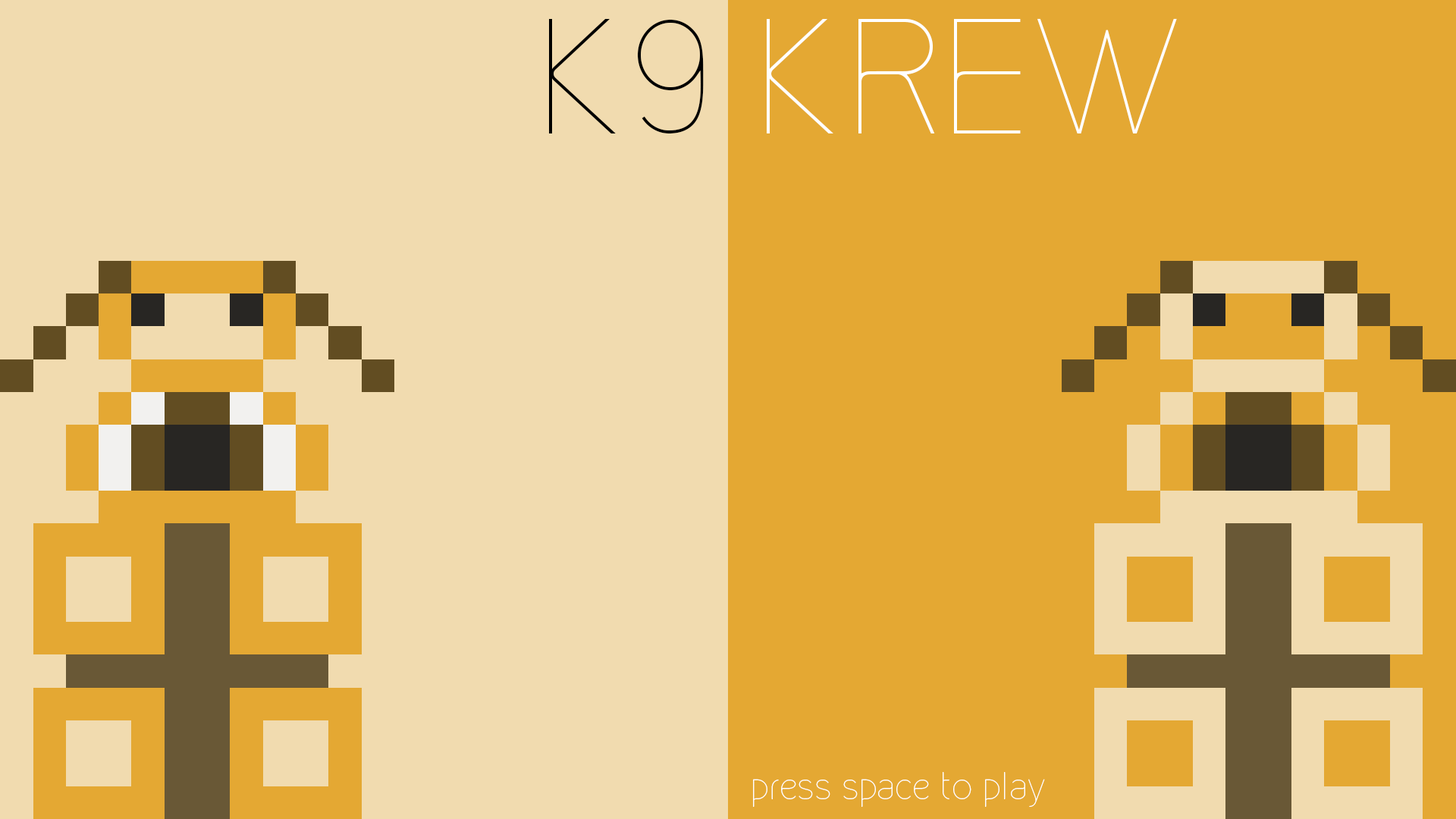
<style>
.page{position:relative;width:1456px;height:819px;background:#f1dbaf}
.page>*{position:absolute;margin:0}
.t1{font:151.7px "Kirvy-Thin";color:#ffffff}
.t2{font:151.7px "Kirvy-Thin";color:#000000}
.t3{font:36.4px "Kirvy-Thin";color:#ffffff}
</style>
<div class="page">
<p class="t1" style="left:549px;top:18px;width:628px;height:115px"><span class="t2">K9</span> KREW</p>
<p class="t3" style="left:753px;top:772px;width:292px;height:35px">press space to play</p>
</div>
